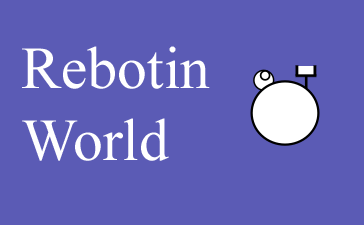
<style>
.page{position:relative;width:364px;height:225px;background:#5b5bb5}
.page>*{position:absolute;margin:0}
.t1{font:59.8px "TimesNewRomanPSMT";color:#ffffff}
</style>
<div class="page">
<p class="t1" style="left:22px;top:46px;width:188px;height:115px">Rebotin<br>World</p>
</div>
